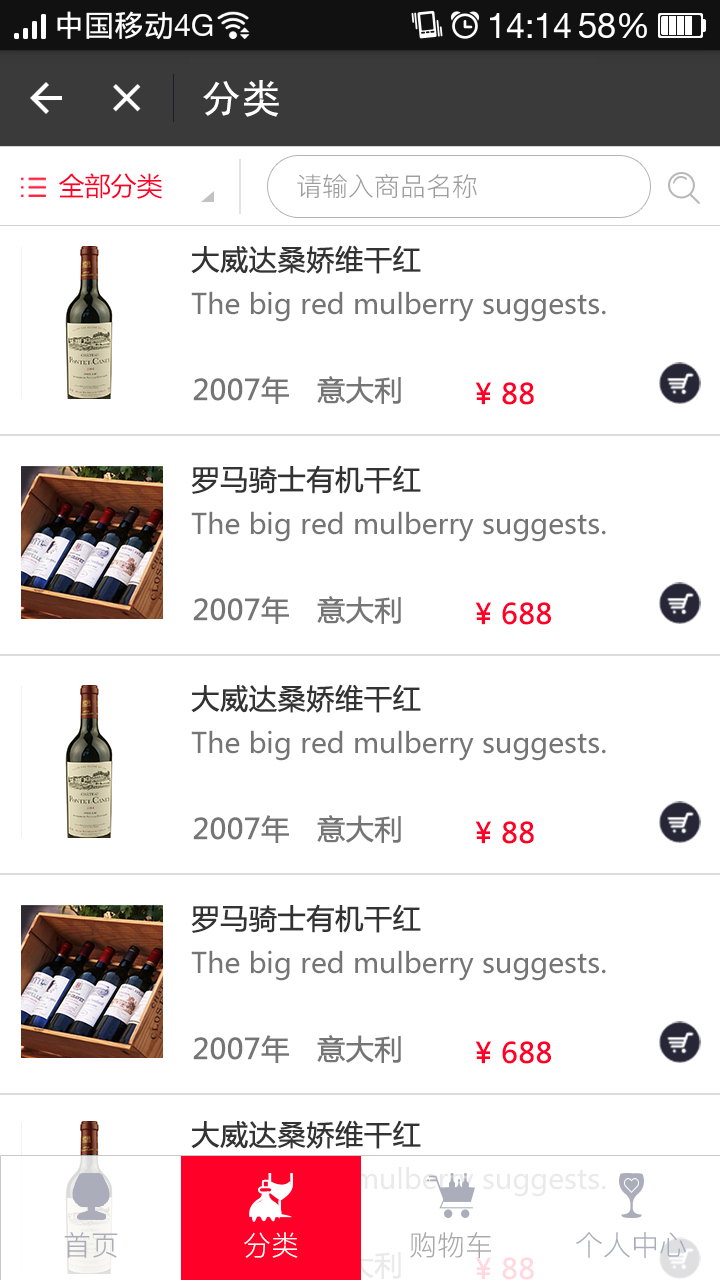
<style>
.page{position:relative;width:720px;height:1280px;background:#ffffff}
.page>*{position:absolute;margin:0}
.t1{font:40px "SimHei";color:#ffffff}
.t2{font:26px "MicrosoftYaHei";color:#ff0029}
.t3{font:26px "PingFang-SC-Regular";color:#9e9e9e}
.t4{font:28px "MicrosoftYaHei";color:#333333;font-weight:bold}
.t5{font:28px "MicrosoftYaHei";color:#757575}
.t6{font:28px "MicrosoftYaHei";color:#757575;font-weight:bold}
.t7{font:28px "MicrosoftYaHei";color:#ff0029;font-weight:bold}
.t8{font:28px "PingFang-SC-Regular";color:#abadbb;text-transform:uppercase}
.t9{font:28px "PingFang-SC-Regular";color:#ffffff;text-transform:uppercase}
.t10{font:28px "PingFang-SC-Regular";color:#a9a9a9;text-transform:uppercase}
.t11{font:28px "MicrosoftYaHei";color:#ffd9df;font-weight:bold}
</style>
<div class="page">
<p class="t1" style="left:203px;top:80px;width:76px;height:37px">分类</p>
<p class="t2" style="left:59px;top:173px;width:104px;height:26px">全部分类</p>
<p class="t3" style="left:297px;top:174px;width:180px;height:24px">请输入商品名称</p>
<p class="t4" style="left:191px;top:245px;width:230px;height:29px">大威达桑娇维干红</p>
<p class="t5" style="left:191px;top:291px;width:415px;height:31px">The big red mulberry suggests.</p>
<p class="t6" style="left:193px;top:376px;width:208px;height:28px">2007年   意大利</p>
<p class="t7" style="left:475px;top:382px;width:59px;height:23px">¥ 88</p>
<p class="t4" style="left:191px;top:465px;width:230px;height:29px">罗马骑士有机干红</p>
<p class="t5" style="left:191px;top:511px;width:415px;height:31px">The big red mulberry suggests.</p>
<p class="t6" style="left:193px;top:596px;width:208px;height:28px">2007年   意大利</p>
<p class="t7" style="left:475px;top:602px;width:76px;height:23px">¥ 688</p>
<p class="t4" style="left:191px;top:684px;width:230px;height:29px">大威达桑娇维干红</p>
<p class="t5" style="left:191px;top:730px;width:415px;height:31px">The big red mulberry suggests.</p>
<p class="t6" style="left:193px;top:815px;width:208px;height:28px">2007年   意大利</p>
<p class="t7" style="left:475px;top:821px;width:59px;height:23px">¥ 88</p>
<p class="t4" style="left:191px;top:904px;width:230px;height:29px">罗马骑士有机干红</p>
<p class="t5" style="left:191px;top:950px;width:415px;height:31px">The big red mulberry suggests.</p>
<p class="t6" style="left:193px;top:1035px;width:208px;height:28px">2007年   意大利</p>
<p class="t7" style="left:475px;top:1041px;width:76px;height:23px">¥ 688</p>
<p class="t4" style="left:191px;top:1120px;width:230px;height:29px">大威达桑娇维干红</p>
<p class="t8" style="left:64px;top:1232px;width:54px;height:26px">首页</p>
<p class="t9" style="left:244px;top:1232px;width:54px;height:26px">分类</p>
<p class="t10" style="left:410px;top:1232px;width:81px;height:26px">购物车</p>
<p class="t8" style="left:576px;top:1232px;width:110px;height:26px">个人中心</p>
<p class="t7" style="left:193px;top:1251px;width:208px;height:28px">2007年   意大利</p>
<p class="t11" style="left:475px;top:1257px;width:59px;height:23px">¥ 88</p>
</div>
